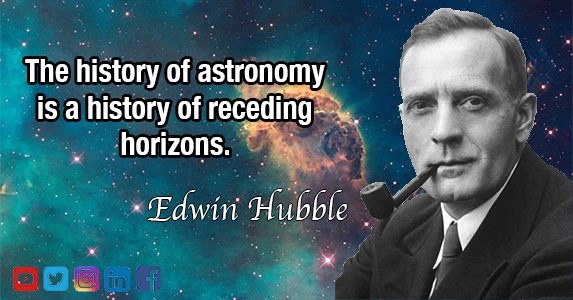
<style>
.page{position:relative;width:573px;height:300px}
.page>*{position:absolute;margin:0}
.t1{font:31.7px "HelveticaNeue-CondensedBold";color:#ffffff;scale:0.95 1}
.t2{font:35px "Apple-Chancery";color:#ffffff;scale:0.95 1}
</style>
<div class="page">
<p class="t1" style="left:25px;top:59px;width:300px;height:96px;text-align:center">The history of astronomy is a history of receding horizons.</p>
<p class="t2" style="left:147px;top:189px;width:200px;height:32px">Edwin Hubble</p>
</div>
